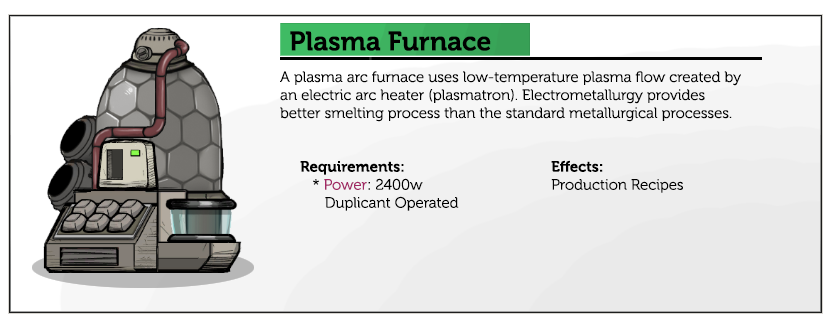
<style>
.page{position:relative;width:830px;height:330px;background:#ffffff}
.page>*{position:absolute;margin:0}
.t1{font:26.7px "Museo-700";color:#000000}
.t2{font:15px "Museo-300";color:#000000}
.t3{font:15px "Museo-700";color:#000000}
.t4{font:15px "Museo-300";color:#a12864}
</style>
<div class="page">
<p class="t1" style="left:290px;top:31px;width:201px;height:20px">Plasma Furnace</p>
<p class="t2" style="left:280px;top:71px;width:461px;height:51px">A plasma arc furnace uses low-temperature plasma flow created by an electric arc heater (plasmatron). Electrometallurgy provides better smelting process than the standard metallurgical processes.</p>
<p class="t2" style="left:300px;top:161px;width:159px;height:50px"><span class="t3">Requirements:<br></span>   * <span class="t4">Power</span>: 2400w<br>      Duplicant Operated</p>
<p class="t2" style="left:551px;top:160px;width:132px;height:33px"><span class="t3">Effects:</span><br>Production Recipes</p>
</div>
